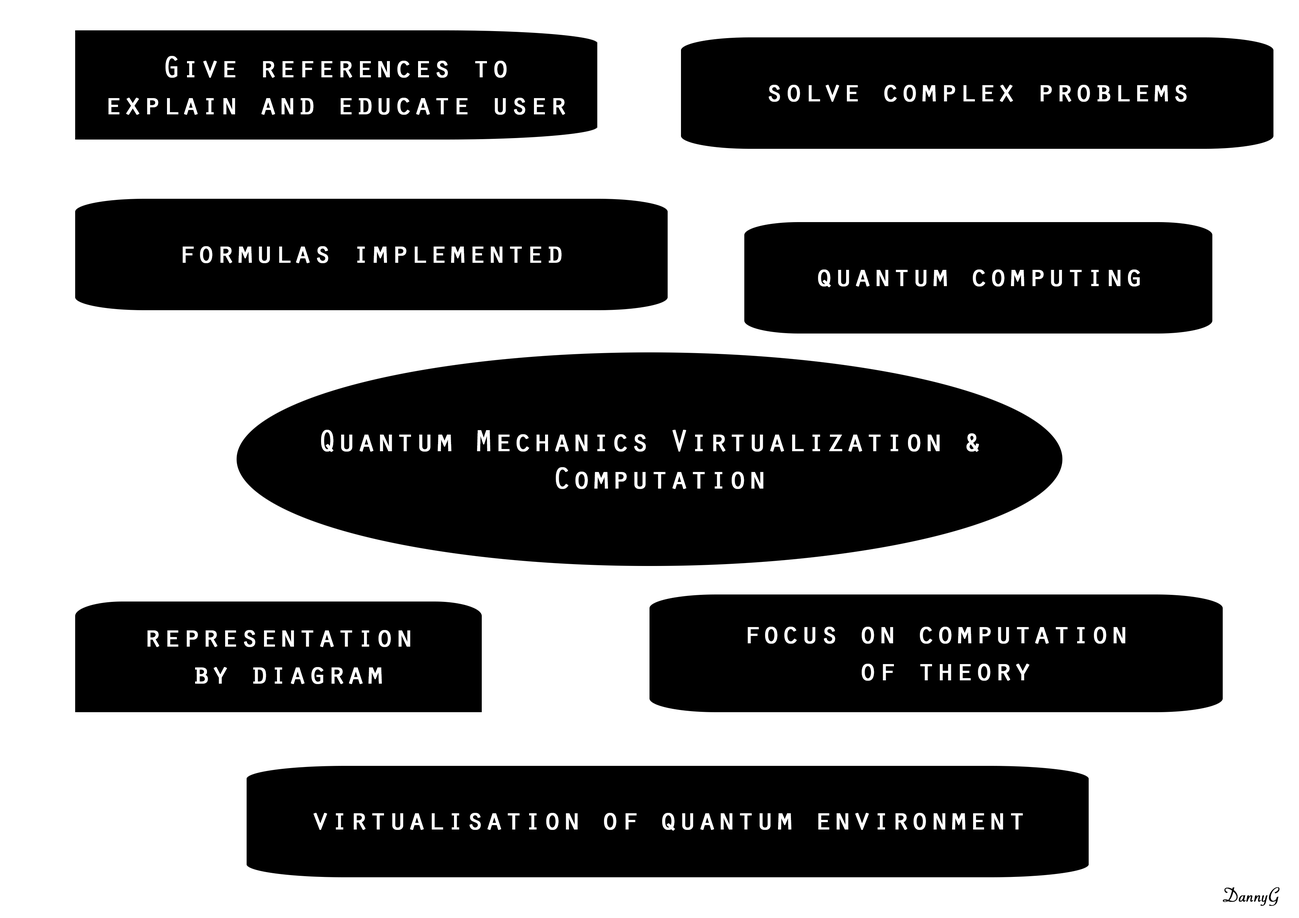
<style>
.page{position:relative;width:1299px;height:918px;background:#ffffff}
.page>*{position:absolute;margin:0}
.t1{font:30.9px "OratorStd";color:#ffffff;font-weight:bold}
.t2{font:30.9px "OratorStd";color:#fefefe;font-weight:bold}
.t3{font:31.2px "OratorStd";color:#ffffff;font-weight:bold}
.t4{font:21.6px "SavoyeLetPlain";color:#000000;font-weight:bold}
</style>
<div class="page">
<p class="t1" style="left:108px;top:56px;width:457px;height:59px;text-align:center">Give references to<br>explain and educate user</p>
<p class="t2" style="left:769px;top:85px;width:418px;height:17px">solve complex problems</p>
<p class="t2" style="left:183px;top:246px;width:379px;height:17px">formulas implemented</p>
<p class="t1" style="left:818px;top:270px;width:322px;height:17px">quantum computing</p>
<p class="t3" style="left:321px;top:430px;width:658px;height:59px;text-align:center">Quantum Mechanics Virtualization &amp; <br>Computation</p>
<p class="t1" style="left:747px;top:627px;width:378px;height:54px;text-align:center">focus on computation <br>of theory</p>
<p class="t1" style="left:147px;top:630px;width:263px;height:54px;text-align:center">representation <br>by diagram</p>
<p class="t1" style="left:313px;top:813px;width:710px;height:18px">virtualisation of quantum environment</p>
<p class="t4" style="left:1222px;top:887px;width:57px;height:19px">DannyG</p>
</div>
